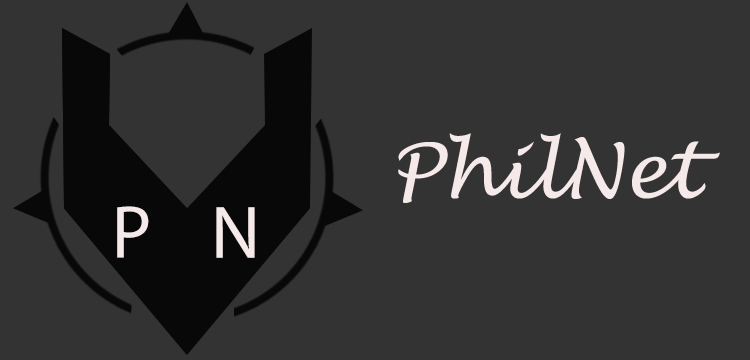
<style>
.page{position:relative;width:750px;height:360px;background:#333333}
.page>*{position:absolute;margin:0}
.t1{font:75px "LucidaHandwriting-Italic";color:#f5e9e9}
.t2{font:75px "MyriadPro-Regular";color:#f5e9e9}
</style>
<div class="page">
<p class="t1" style="left:398px;top:133px;width:322px;height:70px">PhilNet</p>
<p class="t2" style="left:117px;top:206px;width:32px;height:52px">P</p>
<p class="t2" style="left:216px;top:207px;width:39px;height:51px">N</p>
</div>
